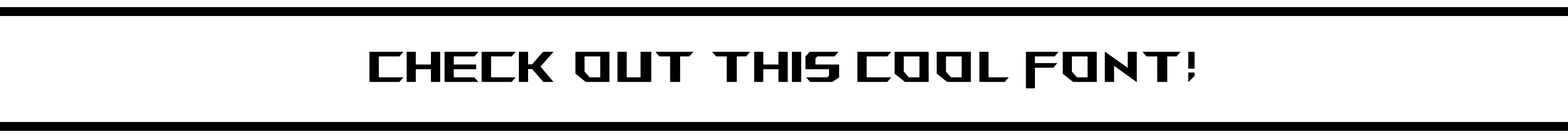
<style>
.page{position:relative;width:1568px;height:138px;background:#ffffff}
.page>*{position:absolute;margin:0}
.t1{font:42.6px "AniMeMatrix-MB_EN";color:#000000;font-weight:bold}
</style>
<div class="page">
<p class="t1" style="left:369px;top:51px;width:826px;height:37px">CHECK OUT THIS COOL FONT!</p>
</div>
